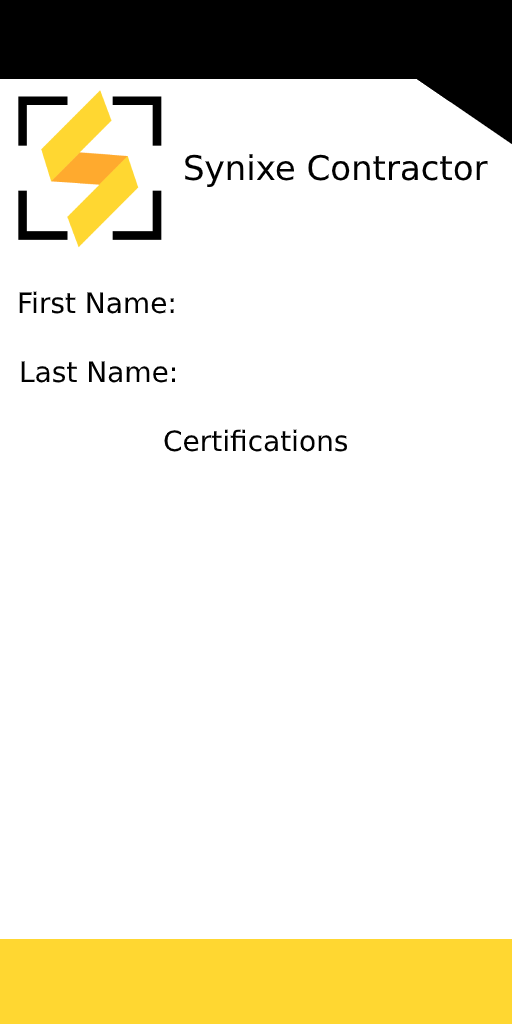
<style>
.page{position:relative;width:512px;height:1024px;background:#ffffff}
.page>*{position:absolute;margin:0}
.t1{font:34px "DejaVuSans";color:#000000}
.t2{font:28px "DejaVuSans";color:#000000}
</style>
<div class="page">
<p class="t1" style="left:185px;top:154px;width:303px;height:34px">Synixe Contractor</p>
<p class="t2" style="left:19px;top:291px;width:155px;height:23px">First Name:</p>
<p class="t2" style="left:21px;top:361px;width:154px;height:22px">Last Name:</p>
<p class="t2" style="left:164px;top:429px;width:184px;height:23px">Certifications</p>
</div>
